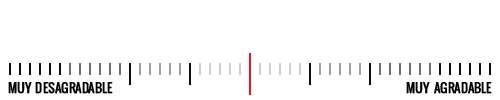
<style>
.page{position:relative;width:500px;height:100px;background:#ffffff}
.page>*{position:absolute;margin:0}
.t1{font:12.5px "Oswald";color:#000000;text-transform:uppercase;font-weight:bold}
</style>
<div class="page">
<p class="t1" style="left:8px;top:82px;width:105px;height:12px">Muy  desagradable</p>
<p class="t1" style="left:406px;top:82px;width:86px;height:12px">Muy  agradable</p>
</div>
